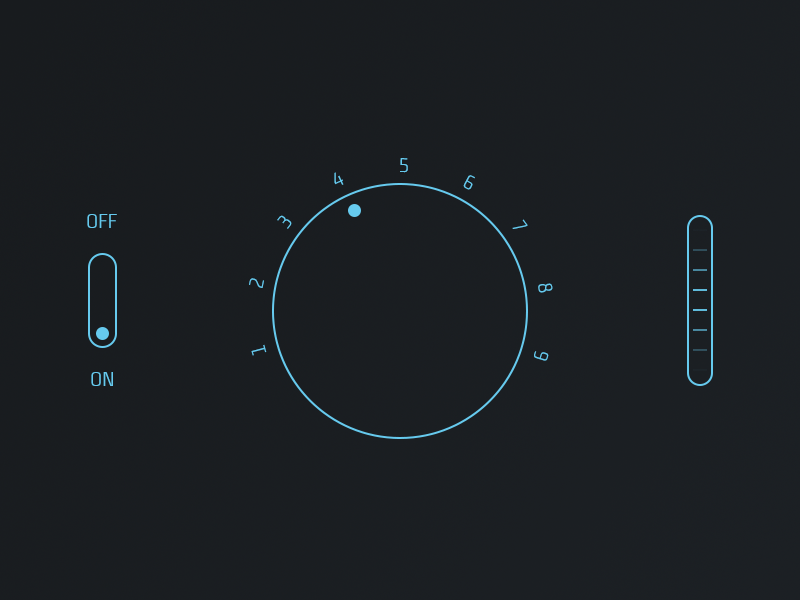
<style>
.page{position:relative;width:800px;height:600px}
.page>*{position:absolute;margin:0}
.t1{font:20px "Niks-Normal";letter-spacing:1.24em;color:#66caee;text-transform:uppercase}
.t2{font:20px "Niks-Normal";color:#66caee;text-transform:uppercase}
</style>
<div class="page">
<p class="t1" style="left:249px;top:158px;width:304px;height:203px;rotate:-45deg">1 2 3 4 5 6 7 8 9</p>
<p class="t2" style="left:87px;top:214px;width:30px;height:14px">OFF</p>
<p class="t2" style="left:91px;top:372px;width:22px;height:14px">ON</p>
</div>
